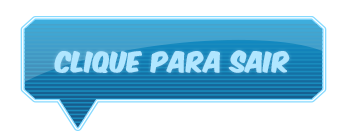
<style>
.page{position:relative;width:350px;height:140px;background:#ffffff}
.page>*{position:absolute;margin:0}
.t1{font:24px "KomikaAxis";color:#b0e6ff;font-weight:bold}
</style>
<div class="page">
<p class="t1" style="left:54px;top:50px;width:236px;height:23px">clique para sair</p>
</div>
